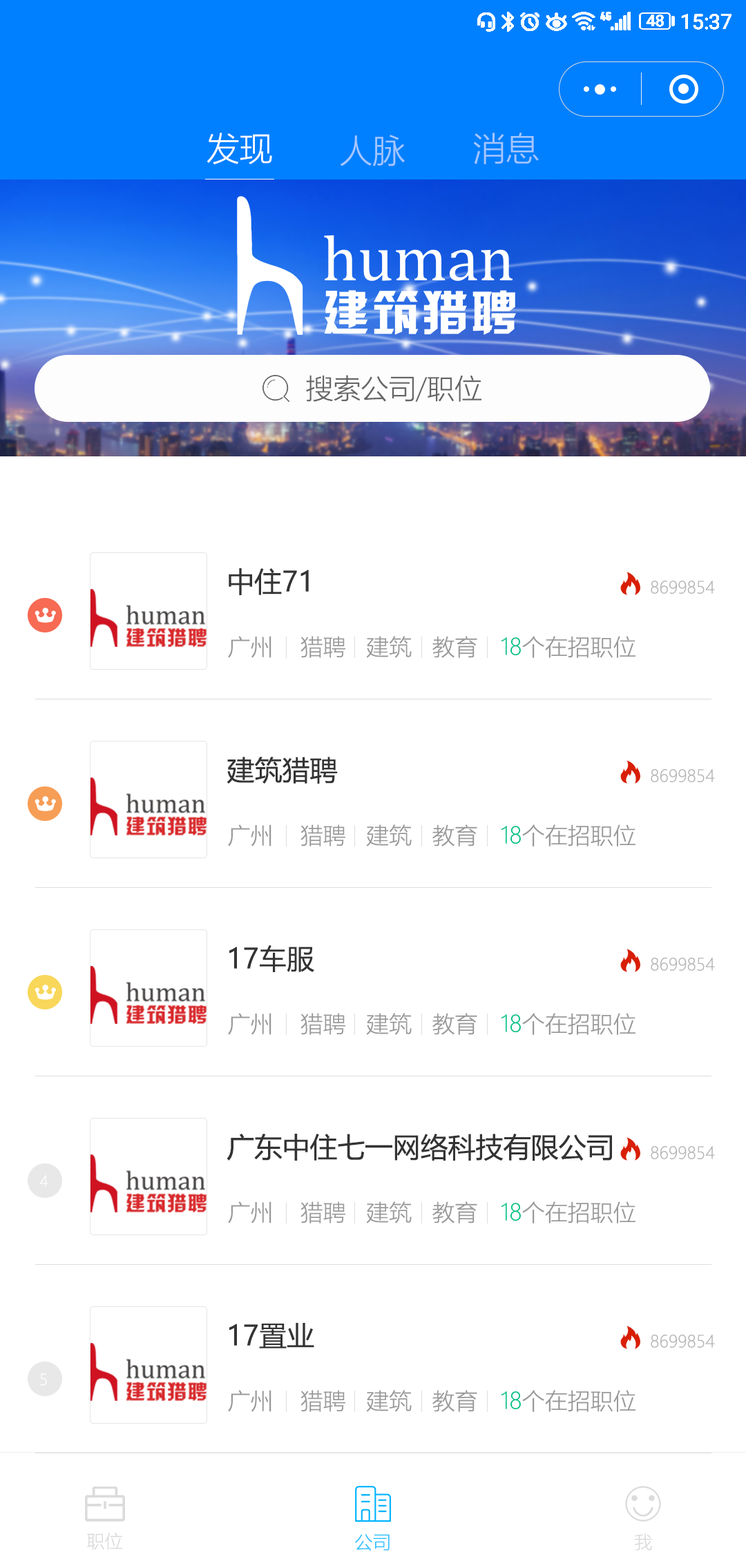
<style>
.page{position:relative;width:746px;height:1568px;background:#ffffff}
.page>*{position:absolute;margin:0}
.t1{font:33.1px "MicrosoftYaHeiLight";color:#ffffff}
.t2{font:33.1px "MicrosoftYaHeiLight";color:#a3c6ff}
.t3{font:27.6px "MicrosoftYaHeiLight";color:#666666}
.t4{font:27.6px "MicrosoftYaHei";color:#333333}
.t5{font:16.6px "MicrosoftYaHeiLight";color:#b3b3b3}
.t6{font:22.8px "MicrosoftYaHeiLight";color:#999999}
.t7{font:22.8px "MicrosoftYaHeiLight";color:#02c38a}
.t8{font:15.2px "MicrosoftYaHeiLight";color:#ffffff}
.t9{font:18px "MicrosoftYaHeiLight";color:#dbdbdb}
.t10{font:18px "MicrosoftYaHeiLight";color:#32c2ff}
</style>
<div class="page">
<p class="t1" style="left:207px;top:133px;width:65px;height:31px">发现</p>
<p class="t2" style="left:340px;top:135px;width:65px;height:31px">人脉</p>
<p class="t2" style="left:473px;top:133px;width:66px;height:31px">消息</p>
<p class="t3" style="left:306px;top:375px;width:175px;height:27px">搜索公司/职位</p>
<p class="t4" style="left:229px;top:568px;width:80px;height:27px">中住71</p>
<p class="t5" style="left:650px;top:581px;width:65px;height:13px">8699854</p>
<p class="t6" style="left:228px;top:636px;width:249px;height:22px">广州    猎聘   建筑   教育</p>
<p class="t6" style="left:501px;top:636px;width:134px;height:22px"><span class="t7">18</span>个在招职位</p>
<p class="t4" style="left:227px;top:757px;width:111px;height:27px">建筑猎聘</p>
<p class="t5" style="left:650px;top:769px;width:65px;height:13px">8699854</p>
<p class="t6" style="left:228px;top:824px;width:249px;height:22px">广州    猎聘   建筑   教育</p>
<p class="t6" style="left:501px;top:824px;width:134px;height:22px"><span class="t7">18</span>个在招职位</p>
<p class="t4" style="left:229px;top:945px;width:85px;height:27px">17车服</p>
<p class="t5" style="left:650px;top:958px;width:65px;height:13px">8699854</p>
<p class="t6" style="left:228px;top:1013px;width:249px;height:22px">广州    猎聘   建筑   教育</p>
<p class="t6" style="left:501px;top:1013px;width:134px;height:22px"><span class="t7">18</span>个在招职位</p>
<p class="t4" style="left:226px;top:1134px;width:386px;height:27px">广东中住七一网络科技有限公司</p>
<p class="t5" style="left:650px;top:1146px;width:65px;height:13px">8699854</p>
<p class="t8" style="left:39px;top:1175px;width:9px;height:12px">4</p>
<p class="t6" style="left:228px;top:1201px;width:249px;height:22px">广州    猎聘   建筑   教育</p>
<p class="t6" style="left:501px;top:1201px;width:134px;height:22px"><span class="t7">18</span>个在招职位</p>
<p class="t4" style="left:229px;top:1323px;width:85px;height:25px">17置业</p>
<p class="t5" style="left:650px;top:1335px;width:65px;height:13px">8699854</p>
<p class="t8" style="left:40px;top:1373px;width:7px;height:13px">5</p>
<p class="t6" style="left:228px;top:1390px;width:249px;height:22px">广州    猎聘   建筑   教育</p>
<p class="t6" style="left:501px;top:1390px;width:134px;height:22px"><span class="t7">18</span>个在招职位</p>
<p class="t9" style="left:87px;top:1532px;width:35px;height:18px">职位</p>
<p class="t10" style="left:355px;top:1534px;width:34px;height:17px">公司</p>
<p class="t9" style="left:635px;top:1533px;width:17px;height:18px">我</p>
</div>
